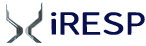
<style>
.page{position:relative;width:146px;height:46px;background:#ffffff}
.page>*{position:absolute;margin:0}
.t1{font:33px "huangkaihuaLawyerfont";color:#070f4d}
</style>
<div class="page">
<p class="t1" style="left:51px;top:12px;width:94px;height:23px">iRESP</p>
</div>
